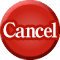
<style>
.page{position:relative;width:60px;height:60px;background:#ffffff}
.page>*{position:absolute;margin:0}
.t1{font:20px "RyuminPro-ExBold";letter-spacing:-0.08em;color:#ffffff}
</style>
<div class="page">
<p class="t1" style="left:3px;top:22px;width:54px;height:16px">Cancel</p>
</div>
